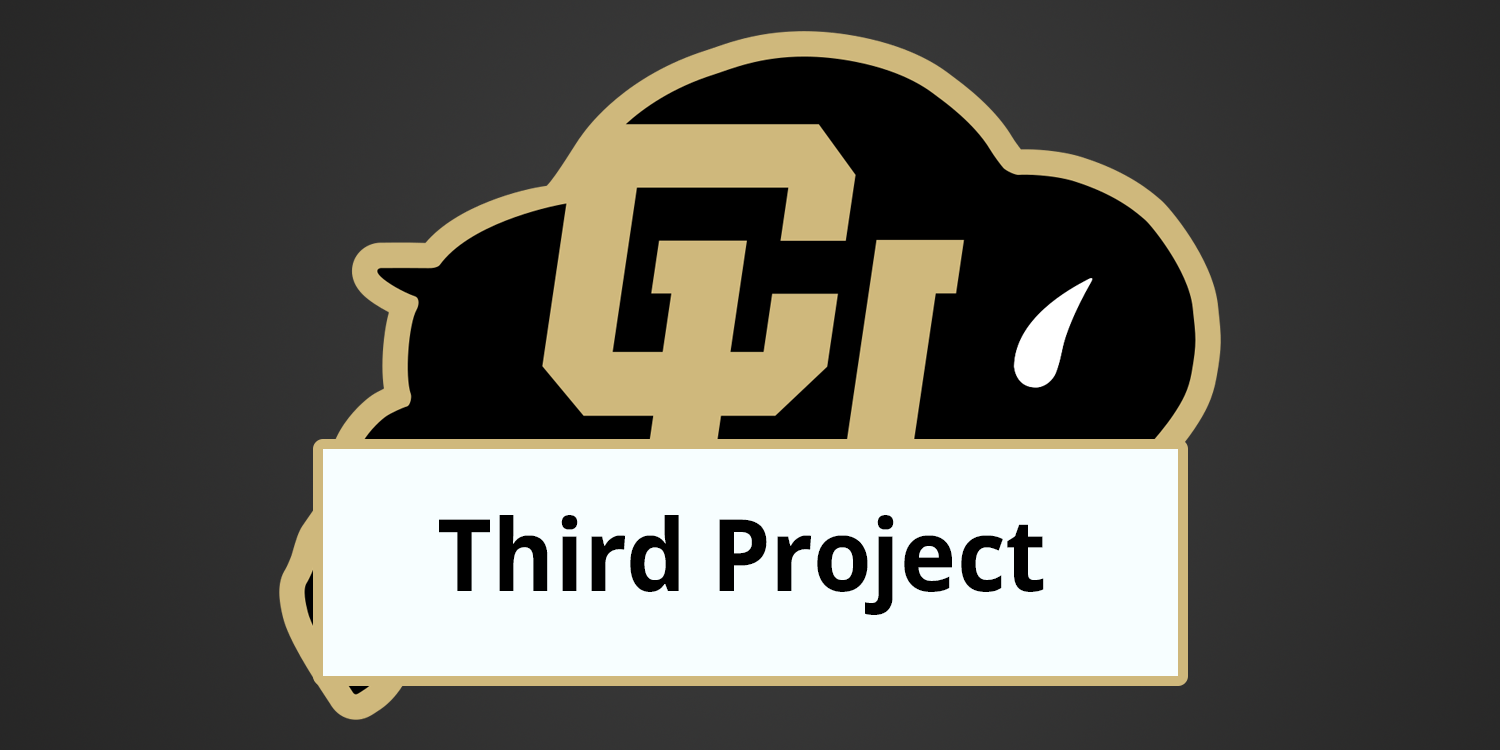
<style>
.page{position:relative;width:1500px;height:750px}
.page>*{position:absolute;margin:0}
.t1{font:100px "NotoSans-Bold";color:#000000;scale:0.95 1}
</style>
<div class="page">
<p class="t1" style="left:439px;top:515px;width:605px;height:100px">Third Project</p>
</div>
